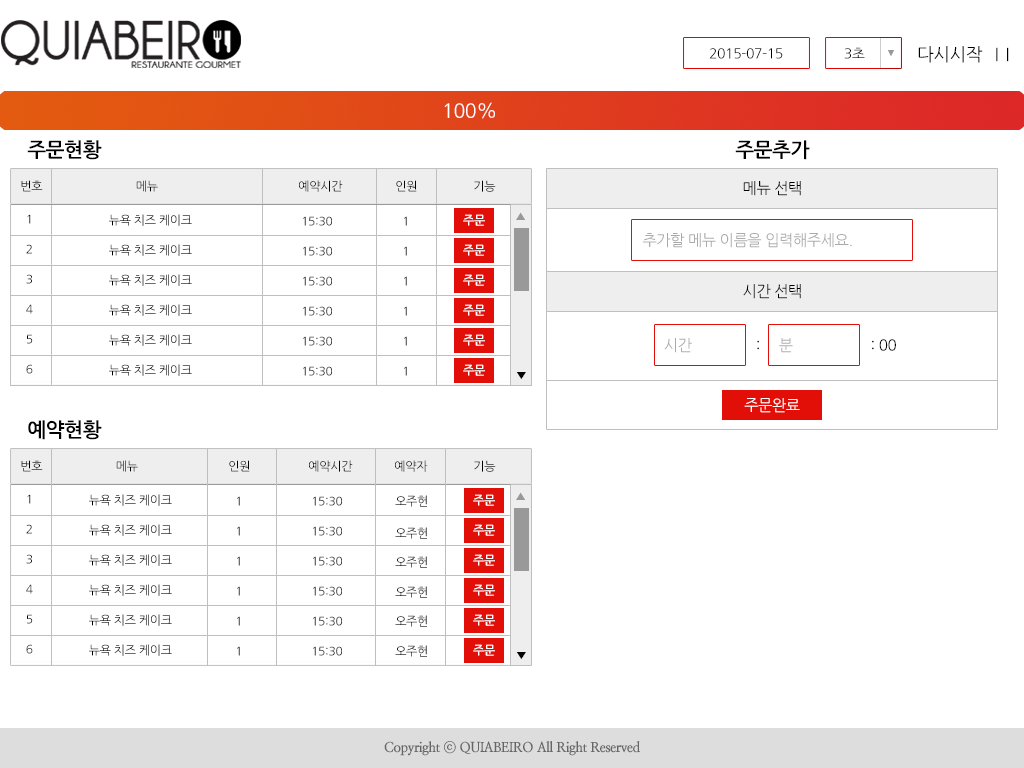
<style>
.page{position:relative;width:1024px;height:768px;background:#ffffff}
.page>*{position:absolute;margin:0}
.t1{font:13.9px "NanumGothic";letter-spacing:-0.025em;color:#000000}
.t2{font:17.7px "NanumGothic";letter-spacing:-0.025em;color:#000000}
.t3{font:15px "NanumGothic";letter-spacing:-0.025em;color:#000000}
.t4{font:19.6px "NanumGothic";letter-spacing:-0.025em;color:#ffffff}
.t5{font:20px "NanumGothicBold";letter-spacing:-0.025em;color:#000000}
.t6{font:11.9px "NanumGothic";letter-spacing:-0.025em;color:#000000}
.t7{font:15.2px "NanumGothic";letter-spacing:-0.025em;color:#000000}
.t8{font:12px "NanumGothic";letter-spacing:-0.025em}
.t9{font:12px "NanumGothic";letter-spacing:-0.025em;color:#000000}
.t10{font:12px "NanumGothicBold";letter-spacing:-0.025em;color:#ffffff}
.t11{font:15.2px "NanumGothic";letter-spacing:-0.025em;color:#aaaaaa}
.t12{font:15.2px "NanumGothic";letter-spacing:-0.025em}
.t13{font:13.7px "NanumMyeongjoExtraBold";letter-spacing:-0.025em;color:#666666}
</style>
<div class="page">
<p class="t1" style="left:709px;top:48px;width:74px;height:11px">2015-07-15</p>
<p class="t1" style="left:844px;top:47px;width:21px;height:12px">3초</p>
<p class="t2" style="left:918px;top:46px;width:65px;height:17px">다시시작</p>
<p class="t3" style="left:996px;top:47px;width:13px;height:15px">|  |</p>
<p class="t4" style="left:444px;top:102px;width:51px;height:17px">100%</p>
<p class="t5" style="left:27px;top:140px;width:75px;height:20px">주문현황</p>
<p class="t5" style="left:735px;top:140px;width:75px;height:20px">주문추가</p>
<p class="t6" style="left:21px;top:180px;width:22px;height:12px">번호</p>
<p class="t6" style="left:136px;top:180px;width:22px;height:12px">메뉴</p>
<p class="t6" style="left:299px;top:180px;width:44px;height:12px">예약시간</p>
<p class="t6" style="left:396px;top:180px;width:21px;height:12px">인원</p>
<p class="t6" style="left:474px;top:180px;width:22px;height:12px">기능</p>
<p class="t7" style="left:743px;top:181px;width:58px;height:15px">메뉴 선택</p>
<p class="t8" style="left:27px;top:214px;width:4px;height:10px">1</p>
<p class="t9" style="left:109px;top:214px;width:83px;height:12px">뉴욕 치즈 케이크</p>
<p class="t8" style="left:303px;top:216px;width:29px;height:10px">15:30</p>
<p class="t8" style="left:404px;top:216px;width:3px;height:10px">1</p>
<p class="t10" style="left:463px;top:214px;width:22px;height:12px">주문</p>
<p class="t11" style="left:643px;top:233px;width:209px;height:15px">추가할 메뉴 이름을 입력해주세요.</p>
<p class="t8" style="left:26px;top:244px;width:6px;height:10px">2</p>
<p class="t9" style="left:109px;top:244px;width:83px;height:12px">뉴욕 치즈 케이크</p>
<p class="t8" style="left:303px;top:246px;width:29px;height:10px">15:30</p>
<p class="t8" style="left:404px;top:246px;width:3px;height:10px">1</p>
<p class="t10" style="left:463px;top:244px;width:22px;height:12px">주문</p>
<p class="t8" style="left:26px;top:274px;width:6px;height:10px">3</p>
<p class="t9" style="left:109px;top:274px;width:83px;height:12px">뉴욕 치즈 케이크</p>
<p class="t8" style="left:303px;top:276px;width:29px;height:10px">15:30</p>
<p class="t8" style="left:404px;top:276px;width:3px;height:10px">1</p>
<p class="t10" style="left:463px;top:274px;width:22px;height:12px">주문</p>
<p class="t7" style="left:743px;top:284px;width:58px;height:15px">시간 선택</p>
<p class="t8" style="left:26px;top:304px;width:7px;height:10px">4</p>
<p class="t9" style="left:109px;top:304px;width:83px;height:12px">뉴욕 치즈 케이크</p>
<p class="t10" style="left:463px;top:304px;width:22px;height:12px">주문</p>
<p class="t8" style="left:303px;top:306px;width:29px;height:10px">15:30</p>
<p class="t8" style="left:404px;top:306px;width:3px;height:10px">1</p>
<p class="t9" style="left:27px;top:334px;width:6px;height:10px">5</p>
<p class="t9" style="left:109px;top:334px;width:83px;height:12px">뉴욕 치즈 케이크</p>
<p class="t8" style="left:303px;top:336px;width:29px;height:10px">15:30</p>
<p class="t8" style="left:404px;top:336px;width:3px;height:10px">1</p>
<p class="t10" style="left:463px;top:334px;width:22px;height:12px">주문</p>
<p class="t11" style="left:664px;top:338px;width:28px;height:15px">시간</p>
<p class="t12" style="left:757px;top:340px;width:2px;height:10px">:</p>
<p class="t11" style="left:779px;top:338px;width:14px;height:15px">분</p>
<p class="t7" style="left:872px;top:339px;width:24px;height:12px">: 00</p>
<p class="t8" style="left:26px;top:364px;width:7px;height:10px">6</p>
<p class="t9" style="left:109px;top:364px;width:83px;height:12px">뉴욕 치즈 케이크</p>
<p class="t8" style="left:303px;top:366px;width:29px;height:10px">15:30</p>
<p class="t8" style="left:404px;top:366px;width:3px;height:10px">1</p>
<p class="t10" style="left:463px;top:364px;width:22px;height:12px">주문</p>
<p class="t5" style="left:28px;top:420px;width:74px;height:20px">예약현황</p>
<p class="t6" style="left:21px;top:460px;width:22px;height:12px">번호</p>
<p class="t6" style="left:116px;top:460px;width:22px;height:12px">메뉴</p>
<p class="t6" style="left:229px;top:460px;width:21px;height:12px">인원</p>
<p class="t6" style="left:309px;top:460px;width:44px;height:12px">예약시간</p>
<p class="t6" style="left:395px;top:460px;width:33px;height:12px">예약자</p>
<p class="t6" style="left:474px;top:460px;width:22px;height:12px">기능</p>
<p class="t8" style="left:27px;top:494px;width:4px;height:10px">1</p>
<p class="t9" style="left:89px;top:494px;width:83px;height:12px">뉴욕 치즈 케이크</p>
<p class="t8" style="left:237px;top:496px;width:3px;height:10px">1</p>
<p class="t8" style="left:313px;top:496px;width:29px;height:10px">15:30</p>
<p class="t8" style="left:395px;top:495px;width:32px;height:12px">오주헌</p>
<p class="t10" style="left:473px;top:494px;width:22px;height:12px">주문</p>
<p class="t8" style="left:26px;top:524px;width:6px;height:10px">2</p>
<p class="t9" style="left:89px;top:524px;width:83px;height:12px">뉴욕 치즈 케이크</p>
<p class="t8" style="left:237px;top:526px;width:3px;height:10px">1</p>
<p class="t8" style="left:313px;top:526px;width:29px;height:10px">15:30</p>
<p class="t8" style="left:395px;top:527px;width:32px;height:12px">오주헌</p>
<p class="t10" style="left:473px;top:524px;width:22px;height:12px">주문</p>
<p class="t8" style="left:26px;top:554px;width:6px;height:10px">3</p>
<p class="t9" style="left:89px;top:554px;width:83px;height:12px">뉴욕 치즈 케이크</p>
<p class="t8" style="left:237px;top:556px;width:3px;height:10px">1</p>
<p class="t8" style="left:313px;top:556px;width:29px;height:10px">15:30</p>
<p class="t8" style="left:395px;top:556px;width:32px;height:12px">오주헌</p>
<p class="t10" style="left:473px;top:554px;width:22px;height:12px">주문</p>
<p class="t8" style="left:26px;top:584px;width:7px;height:10px">4</p>
<p class="t9" style="left:89px;top:584px;width:83px;height:12px">뉴욕 치즈 케이크</p>
<p class="t8" style="left:237px;top:586px;width:3px;height:10px">1</p>
<p class="t8" style="left:313px;top:586px;width:29px;height:10px">15:30</p>
<p class="t8" style="left:395px;top:586px;width:32px;height:12px">오주헌</p>
<p class="t10" style="left:473px;top:584px;width:22px;height:12px">주문</p>
<p class="t9" style="left:27px;top:614px;width:6px;height:10px">5</p>
<p class="t9" style="left:89px;top:614px;width:83px;height:12px">뉴욕 치즈 케이크</p>
<p class="t8" style="left:237px;top:616px;width:3px;height:10px">1</p>
<p class="t8" style="left:313px;top:616px;width:29px;height:10px">15:30</p>
<p class="t8" style="left:395px;top:615px;width:32px;height:12px">오주헌</p>
<p class="t10" style="left:473px;top:614px;width:22px;height:12px">주문</p>
<p class="t8" style="left:26px;top:644px;width:7px;height:10px">6</p>
<p class="t9" style="left:89px;top:644px;width:83px;height:12px">뉴욕 치즈 케이크</p>
<p class="t8" style="left:237px;top:646px;width:3px;height:10px">1</p>
<p class="t8" style="left:313px;top:646px;width:29px;height:10px">15:30</p>
<p class="t8" style="left:395px;top:645px;width:32px;height:12px">오주헌</p>
<p class="t10" style="left:473px;top:644px;width:22px;height:12px">주문</p>
<p class="t13" style="left:384px;top:741px;width:256px;height:15px">Copyright ⓒ QUIABEIRO All Right Reserved</p>
</div>
